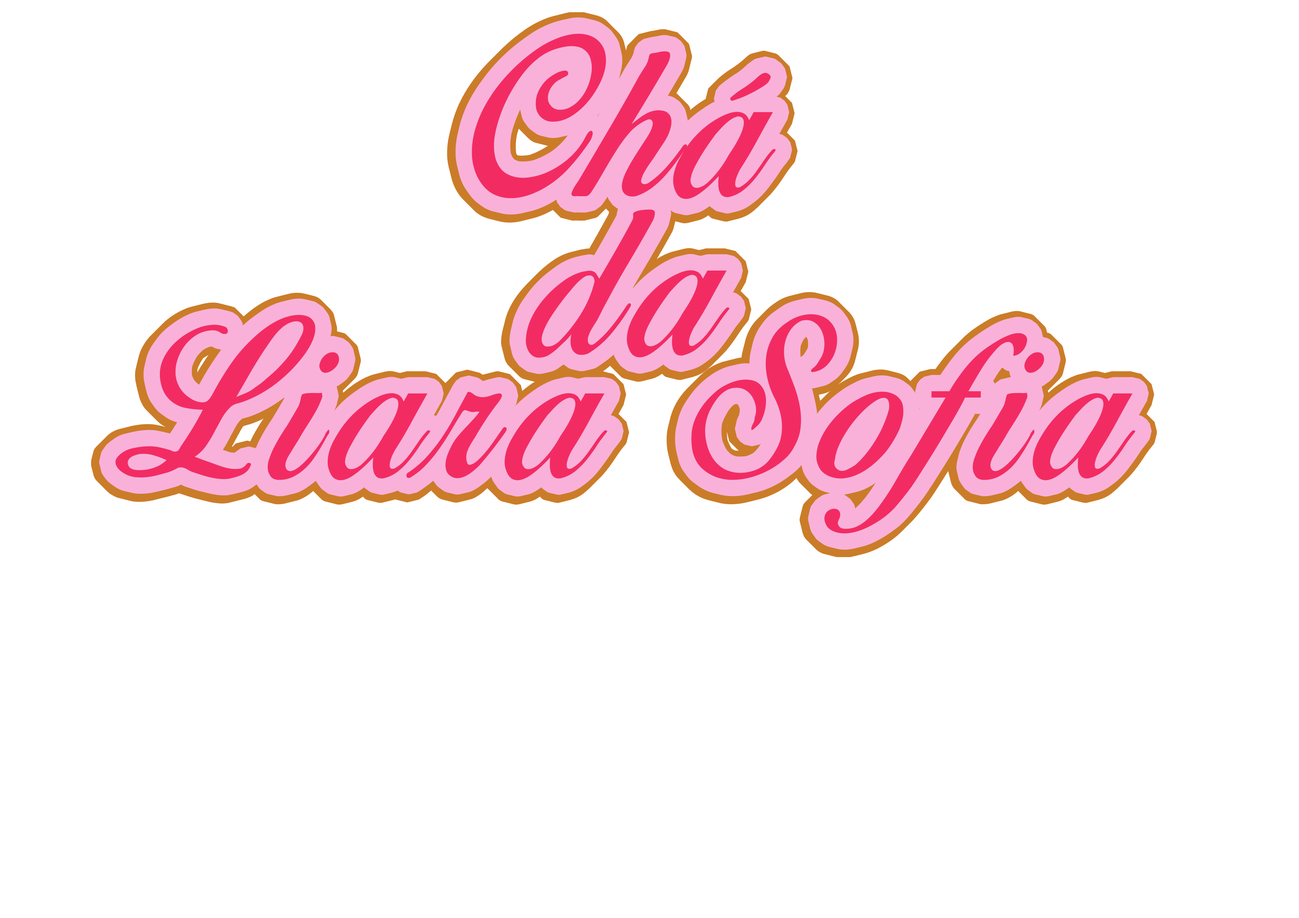
<style>
.page{position:relative;width:1299px;height:918px;background:#ffffff}
.page>*{position:absolute;margin:0}
.t1{font:193.4px/167.7px "BirdsofParadise-PersonaluseOnly";letter-spacing:0.1em;color:#f32b63}
</style>
<div class="page">
<p class="t1" style="left:115px;top:34px;width:1020px;height:499px;text-align:center">Chá<br>da<br>Liara Sofia</p>
</div>
